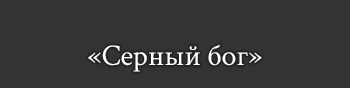
<style>
.page{position:relative;width:350px;height:88px;background:#333333}
.page>*{position:absolute;margin:0}
.t1{font:30px "CrimsonText-Regular";color:#ffffff}
</style>
<div class="page">
<p class="t1" style="left:88px;top:44px;width:174px;height:28px">«Серный бог»</p>
</div>
